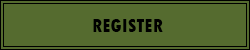
<style>
.page{position:relative;width:250px;height:50px;background:#556b2f}
.page>*{position:absolute;margin:0}
.t1{font:20px "TwCenMT-CondensedExtraBold";color:#000000}
</style>
<div class="page">
<p class="t1" style="left:93px;top:19px;width:70px;height:13px">REGISTER</p>
</div>
